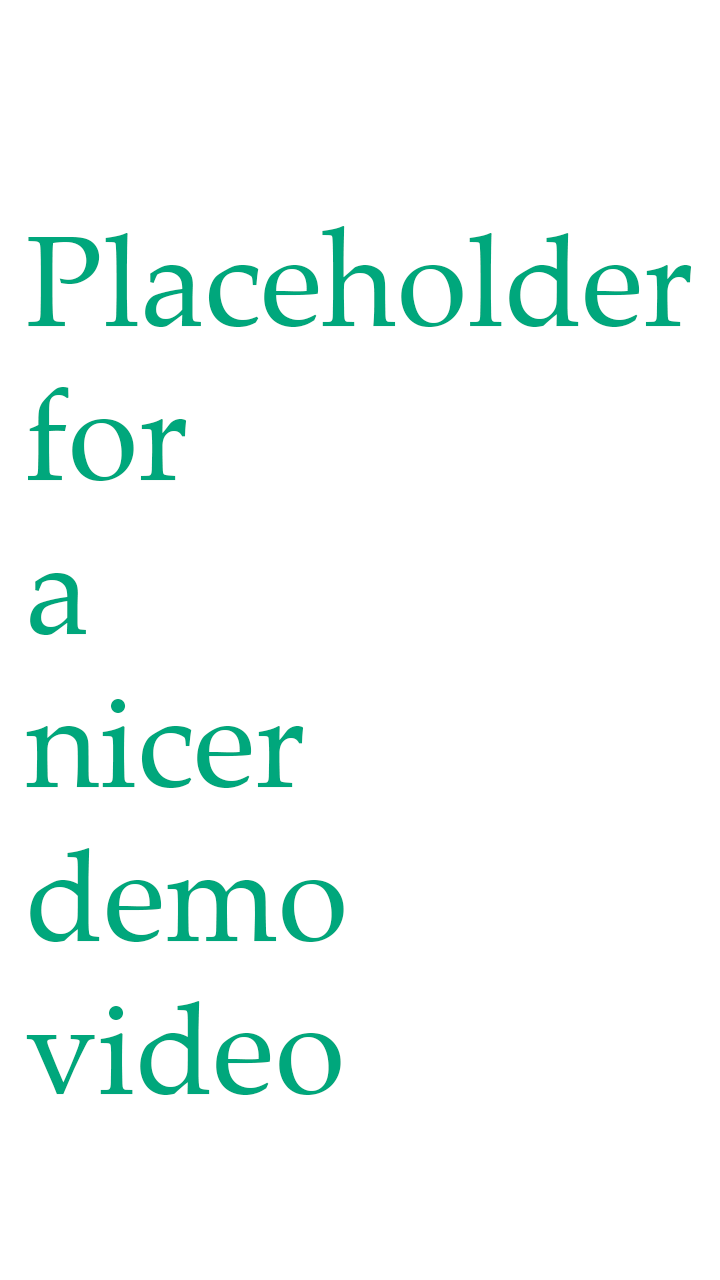
<style>
.page{position:relative;width:720px;height:1280px;background:#ffffff}
.page>*{position:absolute;margin:0}
.t1{font:128px "Palatino-Roman";color:#00a77c}
</style>
<div class="page">
<p class="t1" style="left:26px;top:226px;width:666px;height:869px">Placeholder<br>for <br>a<br>nicer <br>demo <br>video</p>
</div>
